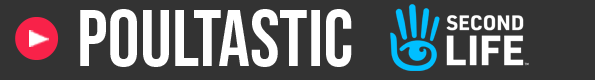
<style>
.page{position:relative;width:595px;height:80px;background:#333333}
.page>*{position:absolute;margin:0}
.t1{font:173.3px "Arial-ItalicMT";color:#f82249}
.t2{font:79.4px "BebasNeue-Regular";color:#ffffff}
</style>
<div class="page">
<p class="t1" style="left:15px;top:17px;width:44px;height:43px">•</p>
<p class="t2" style="left:80px;top:9px;width:272px;height:58px">POULTASTIC</p>
</div>
